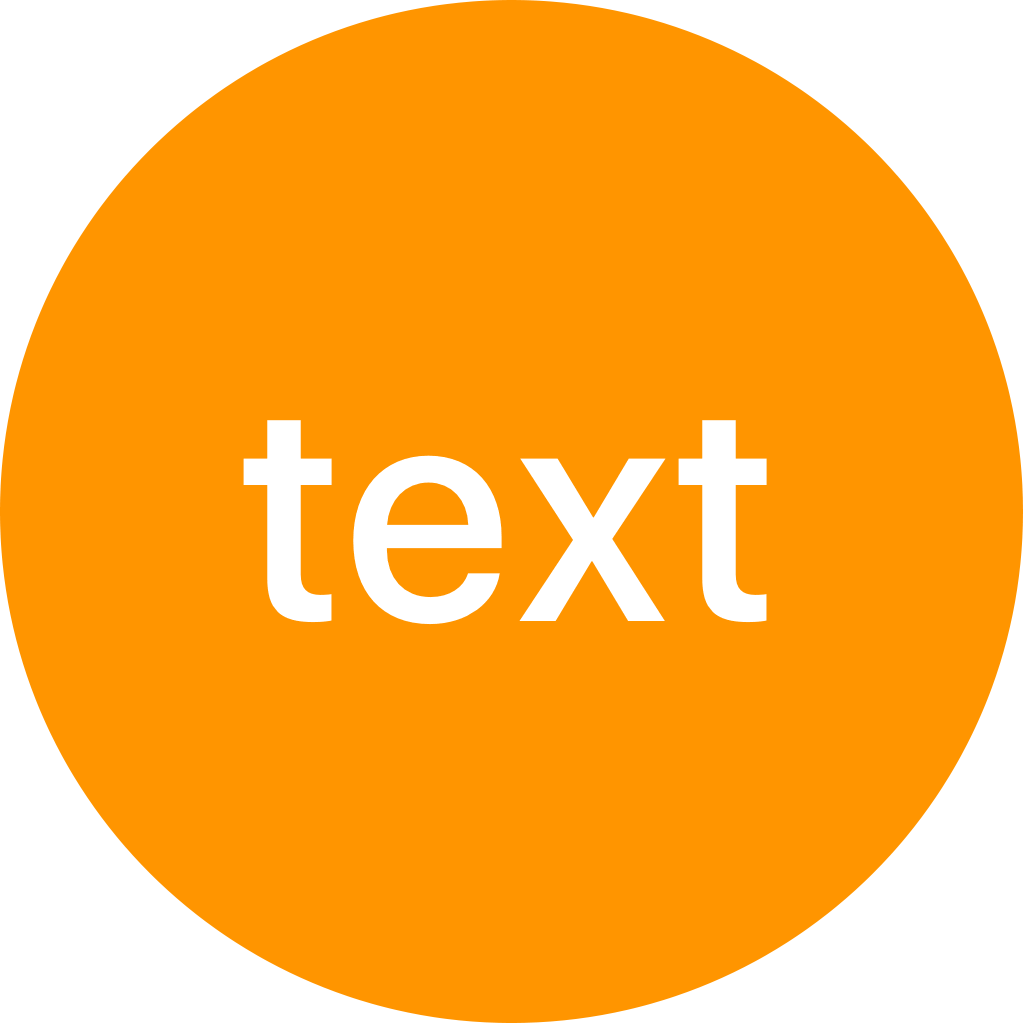
<style>
.page{position:relative;width:1024px;height:1024px;background:#ff9500}
.page>*{position:absolute;margin:0}
.t1{font:316.1px "SFProDisplay-Medium";letter-spacing:0.02em;color:#ffffff}
</style>
<div class="page">
<p class="t1" style="left:243px;top:420px;width:524px;height:205px">text</p>
</div>
